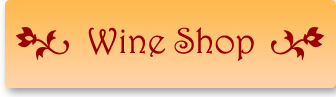
<style>
.page{position:relative;width:336px;height:97px}
.page>*{position:absolute;margin:0}
.t1{font:36px "Harrington";color:#990000}
</style>
<div class="page">
<p class="t1" style="left:88px;top:27px;width:166px;height:34px">Wine Shop</p>
</div>
